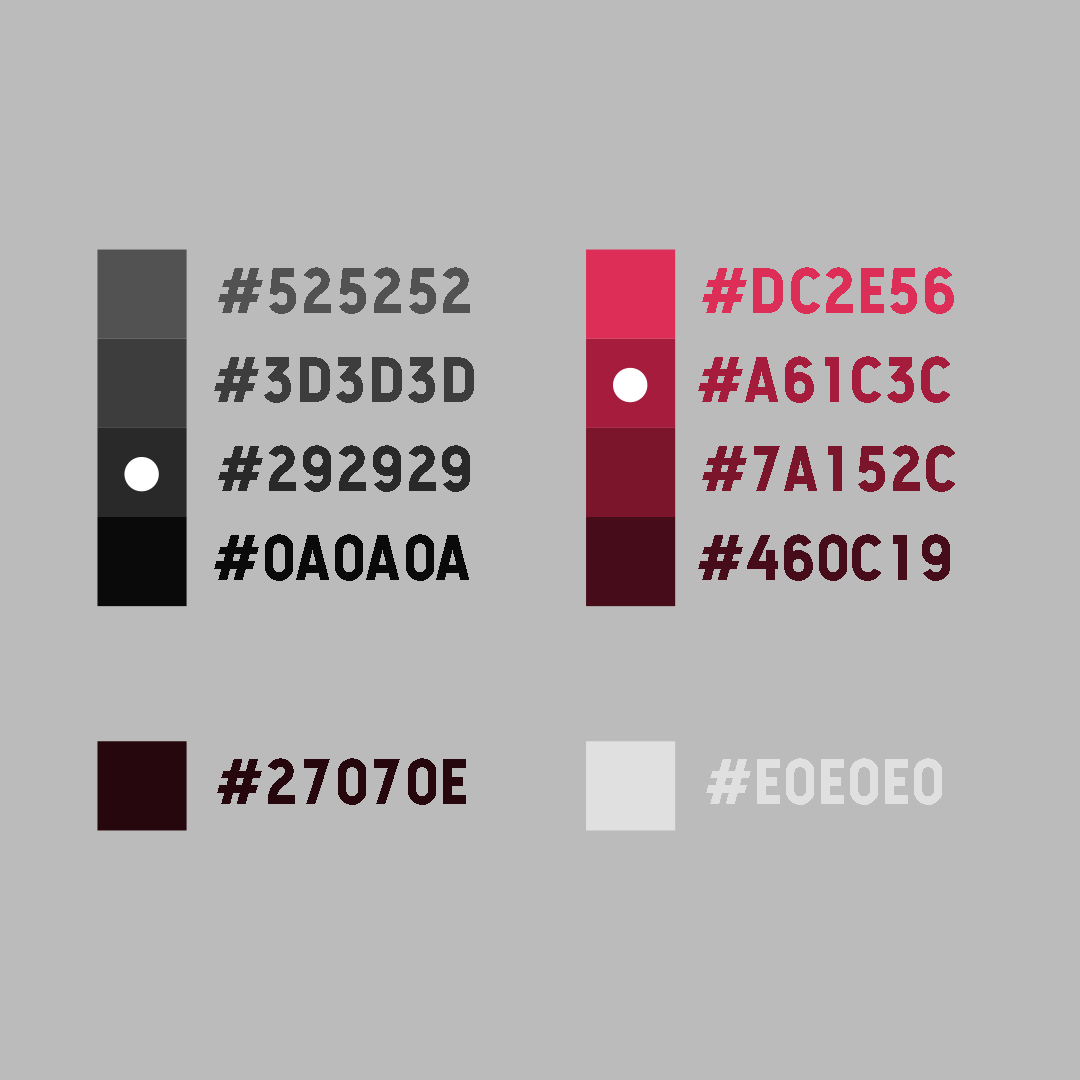
<style>
.page{position:relative;width:1080px;height:1080px;background:#bbbbbb}
.page>*{position:absolute;margin:0}
.t1{font:61.1px "Hansief";letter-spacing:0.04em;color:#525252;text-transform:uppercase}
.t2{font:61.1px "Hansief";letter-spacing:0.04em;color:#dc2e56;text-transform:uppercase}
.t3{font:61.1px "Hansief";letter-spacing:0.04em;color:#3d3d3d;text-transform:uppercase}
.t4{font:61.1px "Hansief";letter-spacing:0.04em;color:#a61c3c;text-transform:uppercase}
.t5{font:61.1px "Hansief";letter-spacing:0.04em;color:#292929;text-transform:uppercase}
.t6{font:61.1px "Hansief";letter-spacing:0.04em;color:#7a152c;text-transform:uppercase}
.t7{font:61.1px "Hansief";letter-spacing:0.04em;color:#0a0a0a;text-transform:uppercase}
.t8{font:61.1px "Hansief";letter-spacing:0.04em;color:#460c19;text-transform:uppercase}
.t9{font:61.1px "Hansief";letter-spacing:0.04em;color:#27070e;text-transform:uppercase}
.t10{font:61.1px "Hansief";letter-spacing:0.04em;color:#e0e0e0;text-transform:uppercase}
</style>
<div class="page">
<p class="t1" style="left:218px;top:267px;width:252px;height:47px">#525252</p>
<p class="t2" style="left:702px;top:267px;width:252px;height:47px">#dc2e56</p>
<p class="t3" style="left:214px;top:357px;width:260px;height:46px">#3d3d3d</p>
<p class="t4" style="left:698px;top:356px;width:252px;height:47px">#a61c3c</p>
<p class="t5" style="left:218px;top:445px;width:252px;height:47px">#292929</p>
<p class="t6" style="left:702px;top:445px;width:253px;height:47px">#7a152c</p>
<p class="t7" style="left:214px;top:534px;width:255px;height:47px">#0a0a0a</p>
<p class="t8" style="left:698px;top:534px;width:252px;height:47px">#460c19</p>
<p class="t9" style="left:217px;top:758px;width:249px;height:47px">#27070e</p>
<p class="t10" style="left:706px;top:758px;width:236px;height:47px">#e0e0e0</p>
</div>
